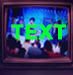
<style>
.page{position:relative;width:73px;height:75px}
.page>*{position:absolute;margin:0}
.t1{font:20.8px "Montserrat-Bold";color:#06f939;font-weight:bold}
</style>
<div class="page">
<p class="t1" style="left:11px;top:24px;width:55px;height:16px">TEXT</p>
</div>
